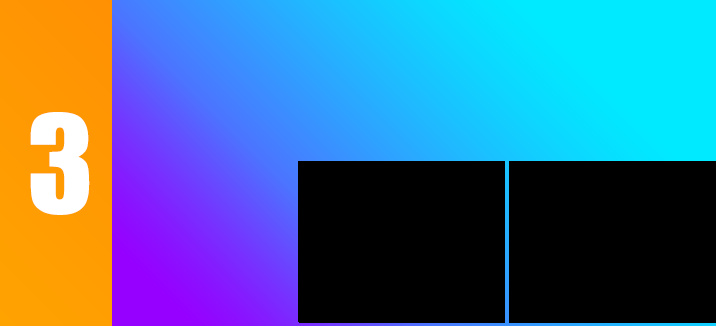
<style>
.page{position:relative;width:716px;height:326px;background:#000000}
.page>*{position:absolute;margin:0}
.t1{font:125px "Impact";color:#ffffff}
</style>
<div class="page">
<p class="t1" style="left:30px;top:112px;width:60px;height:103px">3</p>
</div>
